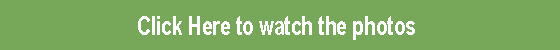
<style>
.page{position:relative;width:560px;height:50px;background:#77a85a}
.page>*{position:absolute;margin:0}
.t1{font:25.6px "Arial-BoldMT";letter-spacing:0.003em;color:#fefefe;scale:0.74 1}
</style>
<div class="page">
<p class="t1" style="left:138px;top:16px;width:277px;height:24px">Click Here to watch the photos</p>
</div>
